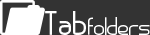
<style>
.page{position:relative;width:150px;height:35px;background:#333333}
.page>*{position:absolute;margin:0}
.t1{font:22px "Stroke-Regular";color:#ffffff}
.t2{font:30px "Stroke-Bold";color:#ffffff}
</style>
<div class="page">
<p class="t1" style="left:45px;top:11px;width:105px;height:24px"><span class="t2">Tab</span>folders</p>
</div>
